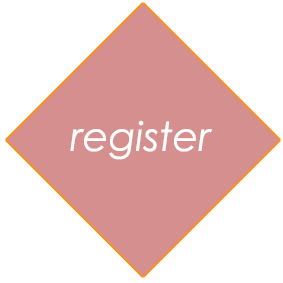
<style>
.page{position:relative;width:283px;height:283px;background:#ffffff}
.page>*{position:absolute;margin:0}
.t1{font:40px "CenturyGothic-Italic";color:#ffffff}
</style>
<div class="page">
<p class="t1" style="left:70px;top:120px;width:143px;height:40px">register</p>
</div>
